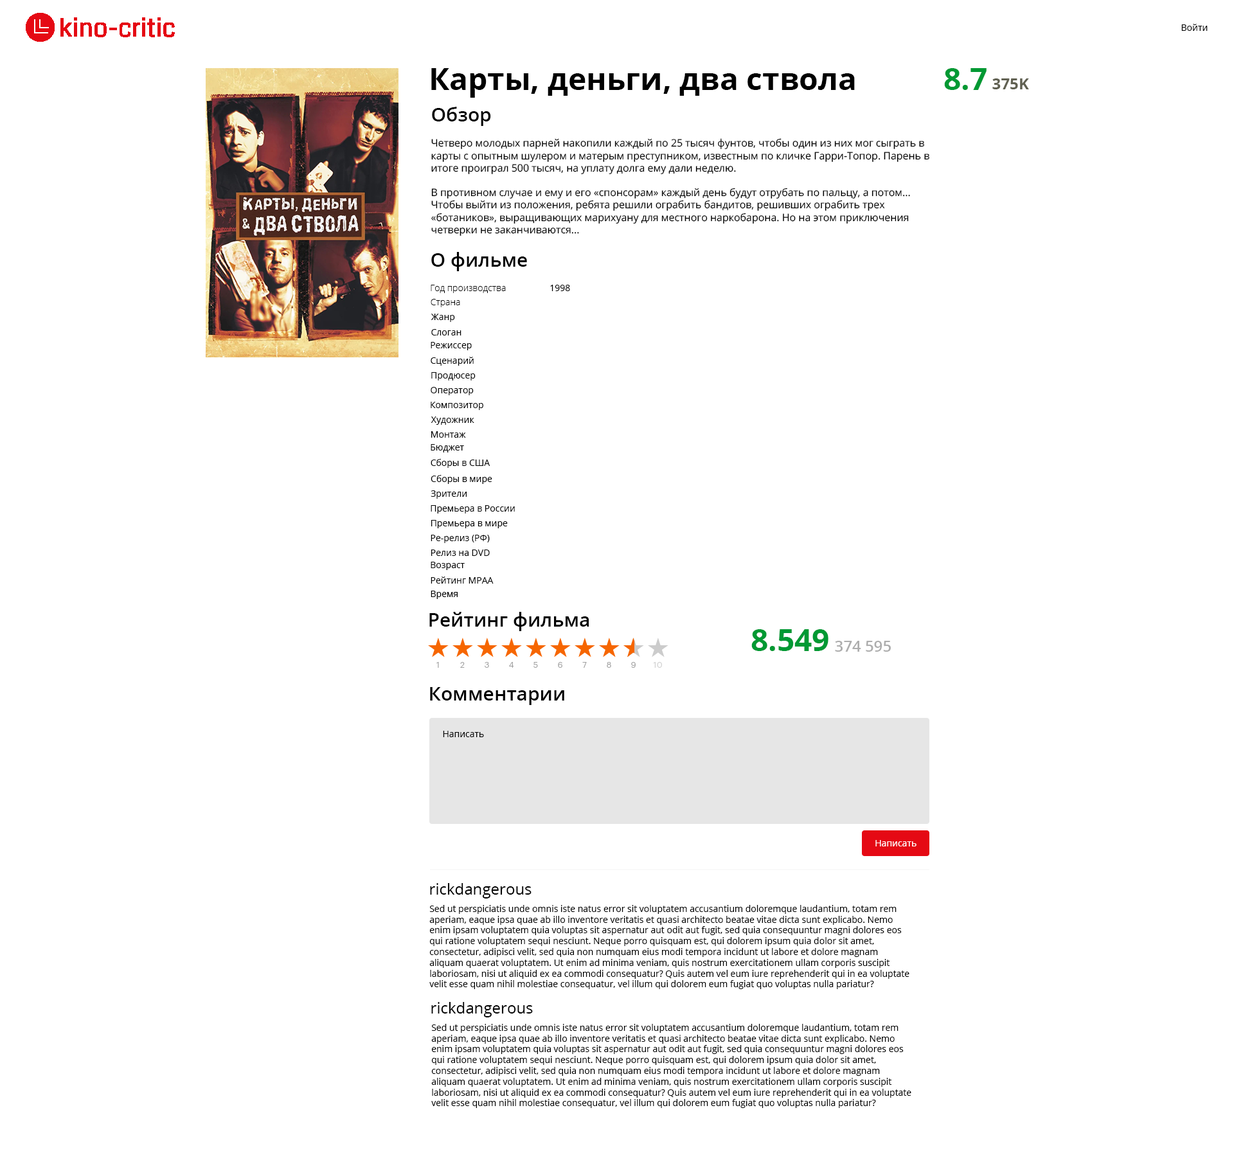
<style>
.page{position:relative;width:1234px;height:1153px;background:#ffffff}
.page>*{position:absolute;margin:0}
.t1{font:9px "aakar-medium";color:#000000}
.t2{font:30.9px "OpenSans-Bold";color:#000000}
.t3{font:30.9px "OpenSans-Bold";color:#009933}
.t4{font:15.4px "OpenSans-Bold";color:#616152}
.t5{font:19.3px "OpenSans-Semibold";color:#000000}
.t6{font:10.3px "OpenSans";color:#000000}
.t7{font:9px "OpenSans-Light";color:#000000}
.t8{font:15.4px "OpenSans-Semibold";color:#adadad}
.t9{font:9px "OpenSans";color:#000000}
.t10{font:9px "aakar-medium";color:#ffffff}
.t11{font:15.4px "OpenSans";color:#000000}
</style>
<div class="page">
<p class="t1" style="left:1182px;top:24px;width:26px;height:7px">Войти</p>
<p class="t2" style="left:431px;top:68px;width:424px;height:30px">Карты, деньги, два ствола</p>
<p class="t3" style="left:944px;top:68px;width:43px;height:22px">8.7</p>
<p class="t4" style="left:993px;top:78px;width:36px;height:11px">375K</p>
<p class="t5" style="left:432px;top:107px;width:59px;height:19px">Обзор</p>
<p class="t6" style="left:431px;top:138px;width:499px;height:98px">Четверо молодых парней накопили каждый по 25 тысяч фунтов, чтобы один из них мог сыграть в карты с опытным шулером и матерым преступником, известным по кличке Гарри-Топор. Парень в итоге проиграл 500 тысяч, на уплату долга ему дали неделю.<br><br>В противном случае и ему и его «спонсорам» каждый день будут отрубать по пальцу, а потом... Чтобы выйти из положения, ребята решили ограбить бандитов, решивших ограбить трех «ботаников», выращивающих марихуану для местного наркобарона. Но на этом приключения четверки не заканчиваются...</p>
<p class="t5" style="left:431px;top:252px;width:96px;height:19px">О фильме</p>
<p class="t7" style="left:431px;top:285px;width:75px;height:8px">Год производства</p>
<p class="t1" style="left:550px;top:285px;width:20px;height:6px">1998</p>
<p class="t7" style="left:431px;top:299px;width:29px;height:8px">Страна</p>
<p class="t1" style="left:431px;top:314px;width:24px;height:8px">Жанр</p>
<p class="t1" style="left:431px;top:329px;width:31px;height:7px">Слоган</p>
<p class="t1" style="left:431px;top:342px;width:41px;height:8px">Режиссер</p>
<p class="t1" style="left:431px;top:357px;width:43px;height:9px">Сценарий</p>
<p class="t1" style="left:431px;top:372px;width:45px;height:9px">Продюсер</p>
<p class="t1" style="left:431px;top:387px;width:43px;height:8px">Оператор</p>
<p class="t1" style="left:431px;top:402px;width:52px;height:8px">Композитор</p>
<p class="t1" style="left:431px;top:417px;width:43px;height:8px">Художник</p>
<p class="t1" style="left:431px;top:431px;width:35px;height:7px">Монтаж</p>
<p class="t1" style="left:431px;top:444px;width:33px;height:9px">Бюджет</p>
<p class="t1" style="left:431px;top:459px;width:60px;height:9px">Сборы в США</p>
<p class="t1" style="left:431px;top:475px;width:61px;height:9px">Сборы в мире</p>
<p class="t1" style="left:431px;top:491px;width:36px;height:8px">Зрители</p>
<p class="t1" style="left:431px;top:505px;width:84px;height:9px">Премьера в Росcии</p>
<p class="t1" style="left:431px;top:520px;width:77px;height:8px">Премьера в мире</p>
<p class="t1" style="left:431px;top:535px;width:59px;height:8px">Ре-релиз (РФ)</p>
<p class="t1" style="left:431px;top:550px;width:59px;height:6px">Релиз на DVD</p>
<p class="t1" style="left:431px;top:562px;width:34px;height:8px">Возраст</p>
<p class="t1" style="left:431px;top:577px;width:63px;height:7px">Рейтинг MPAA</p>
<p class="t1" style="left:431px;top:591px;width:27px;height:8px">Время</p>
<p class="t5" style="left:429px;top:612px;width:160px;height:19px">Рейтинг фильма</p>
<p class="t3" style="left:752px;top:629px;width:77px;height:22px">8.549</p>
<p class="t8" style="left:835px;top:641px;width:56px;height:11px">374 595</p>
<p class="t5" style="left:430px;top:687px;width:134px;height:18px">Комментарии</p>
<p class="t9" style="left:443px;top:731px;width:41px;height:6px">Написать</p>
<p class="t10" style="left:876px;top:840px;width:41px;height:7px">Написать</p>
<p class="t11" style="left:430px;top:883px;width:102px;height:16px">rickdangerous</p>
<p class="t9" style="left:429px;top:905px;width:481px;height:84px">Sed ut perspiciatis unde omnis iste natus error sit voluptatem accusantium doloremque laudantium, totam rem aperiam, eaque ipsa quae ab illo inventore veritatis et quasi architecto beatae vitae dicta sunt explicabo. Nemo enim ipsam voluptatem quia voluptas sit aspernatur aut odit aut fugit, sed quia consequuntur magni dolores eos qui ratione voluptatem sequi nesciunt. Neque porro quisquam est, qui dolorem ipsum quia dolor sit amet, consectetur, adipisci velit, sed quia non numquam eius modi tempora incidunt ut labore et dolore magnam aliquam quaerat voluptatem. Ut enim ad minima veniam, quis nostrum exercitationem ullam corporis suscipit laboriosam, nisi ut aliquid ex ea commodi consequatur? Quis autem vel eum iure reprehenderit qui in ea voluptate velit esse quam nihil molestiae consequatur, vel illum qui dolorem eum fugiat quo voluptas nulla pariatur?</p>
<p class="t11" style="left:431px;top:1002px;width:102px;height:16px">rickdangerous</p>
<p class="t9" style="left:431px;top:1024px;width:481px;height:84px">Sed ut perspiciatis unde omnis iste natus error sit voluptatem accusantium doloremque laudantium, totam rem aperiam, eaque ipsa quae ab illo inventore veritatis et quasi architecto beatae vitae dicta sunt explicabo. Nemo enim ipsam voluptatem quia voluptas sit aspernatur aut odit aut fugit, sed quia consequuntur magni dolores eos qui ratione voluptatem sequi nesciunt. Neque porro quisquam est, qui dolorem ipsum quia dolor sit amet, consectetur, adipisci velit, sed quia non numquam eius modi tempora incidunt ut labore et dolore magnam aliquam quaerat voluptatem. Ut enim ad minima veniam, quis nostrum exercitationem ullam corporis suscipit laboriosam, nisi ut aliquid ex ea commodi consequatur? Quis autem vel eum iure reprehenderit qui in ea voluptate velit esse quam nihil molestiae consequatur, vel illum qui dolorem eum fugiat quo voluptas nulla pariatur?</p>
</div>
